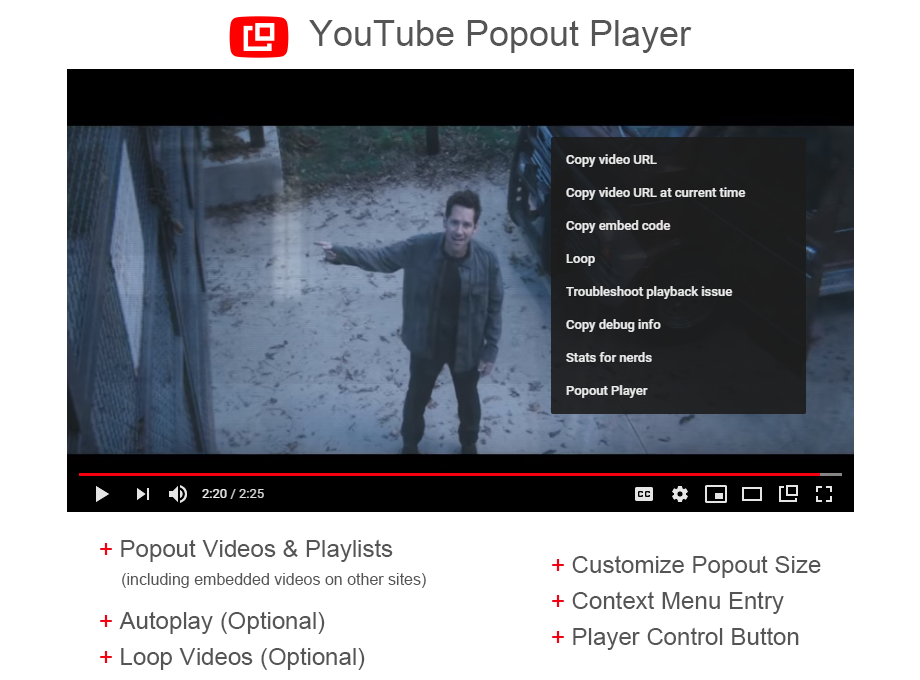
<style>
.page{position:relative;width:920px;height:680px;background:#ffffff}
.page>*{position:absolute;margin:0}
.t1{font:36px "ArialMT";color:#555555}
.t2{font:24px/36px "ArialMT";color:#555555}
.t3{font:16px/36px "ArialMT";color:#555555}
.t4{font:24px/36px "ArialMT";color:#f60011}
</style>
<div class="page">
<p class="t1" style="left:309px;top:20px;width:383px;height:33px">YouTube Popout Player</p>
<p class="t2" style="left:100px;top:539px;width:326px;height:131px">+ Popout Videos &amp; Playlists<br><span class="t3">     (including embedded videos on other sites)<br></span>+ Autoplay (Optional)<br>+ Loop Videos (Optional)</p>
<p class="t4" style="left:100px;top:543px;width:12px;height:120px">+<br><br>+<br>+</p>
<p class="t2" style="left:552px;top:555px;width:269px;height:95px">+ Customize Popout Size<br>+ Context Menu Entry<br>+ Player Control Button</p>
<p class="t4" style="left:552px;top:559px;width:12px;height:84px">+<br>+<br>+</p>
</div>
